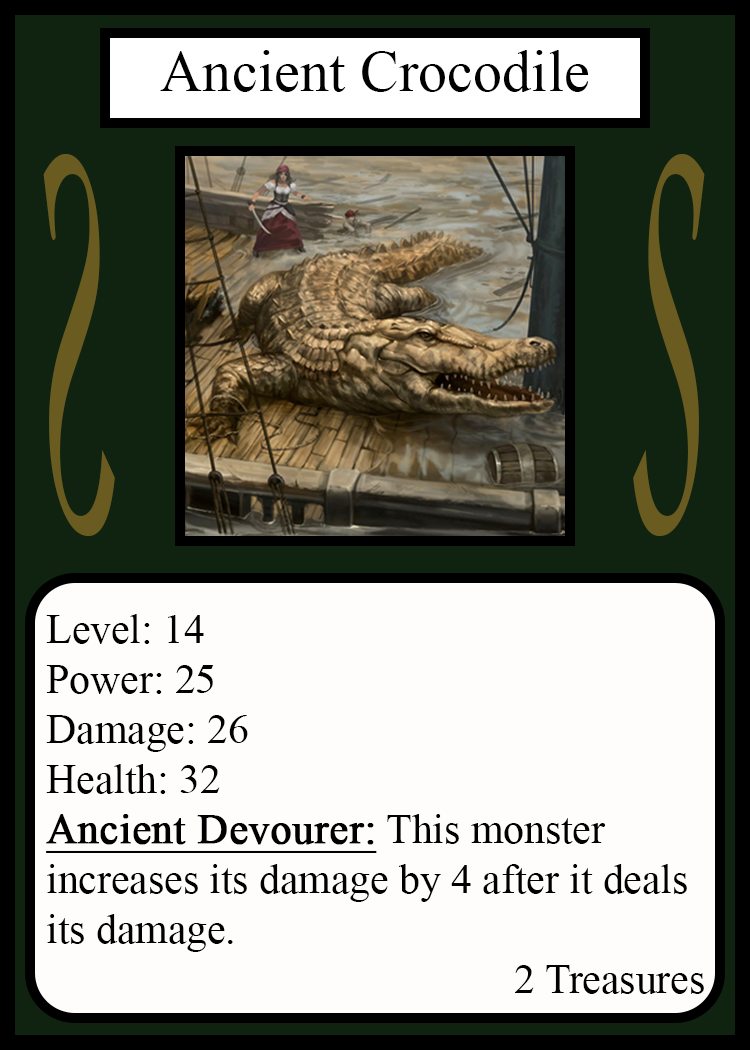
<style>
.page{position:relative;width:750px;height:1050px;background:#fffcfc}
.page>*{position:absolute;margin:0}
.t1{font:58.3px "TimesNewRomanPSMT";color:#010101}
.t2{font:548.5px "Apple-Chancery";color:#6a5c21;scale:0.27 1}
.t3{font:548.2px "Apple-Chancery";color:#6a5c21;scale:0.27 1}
.t4{font:41.7px "TimesNewRomanPSMT";color:#000000}
.t5{font:41.7px "TimesNewRomanPSMT";color:#000000;font-weight:bold;text-decoration:underline}
</style>
<div class="page">
<p class="t1" style="left:160px;top:50px;width:429px;height:42px">Ancient Crocodile</p>
<p class="t2" style="left:43px;top:154px;width:72px;height:382px;rotate:180deg">S</p>
<p class="t3" style="left:633px;top:154px;width:72px;height:382px">S</p>
<p class="t4" style="left:46px;top:614px;width:658px;height:380px">Level: 14<br>Power: 25<br>Damage: 26<br>Health: 32<br><span class="t5">Ancient Devourer:</span> This monster<br>increases its damage by 4 after it deals<br>its damage.<br>             2 Treasures</p>
</div>
